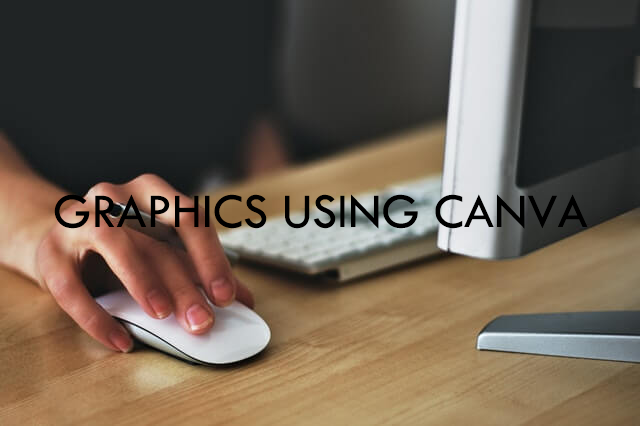
<style>
.page{position:relative;width:640px;height:426px}
.page>*{position:absolute;margin:0}
.t1{font:50px "TwCenMT-Regular";color:#000000}
</style>
<div class="page">
<p class="t1" style="left:54px;top:194px;width:534px;height:35px">GRAPHICS USING CANVA</p>
</div>
